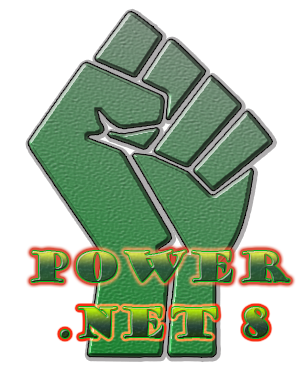
<style>
.page{position:relative;width:307px;height:371px;background:#ffffff}
.page>*{position:absolute;margin:0}
.t1{font:40px "GoudyStout"}
</style>
<div class="page">
<p class="t1" style="left:31px;top:250px;width:259px;height:32px">PowER .NET8</p>
<p class="t1" style="left:60px;top:307px;width:209px;height:31px">8 net.</p>
</div>
